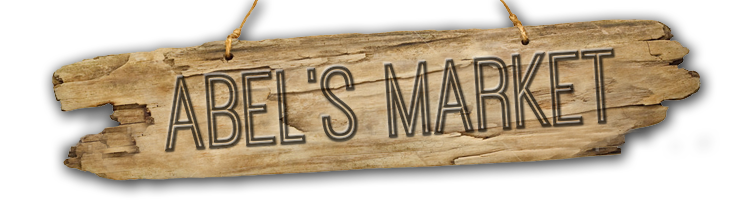
<style>
.page{position:relative;width:750px;height:216px;background:#ffffff}
.page>*{position:absolute;margin:0}
.t1{font:109.3px "OstrichSansInline";color:#463c2d}
</style>
<div class="page">
<p class="t1" style="left:165px;top:48px;width:449px;height:103px;rotate:-4deg">ABEL’S Market</p>
</div>
